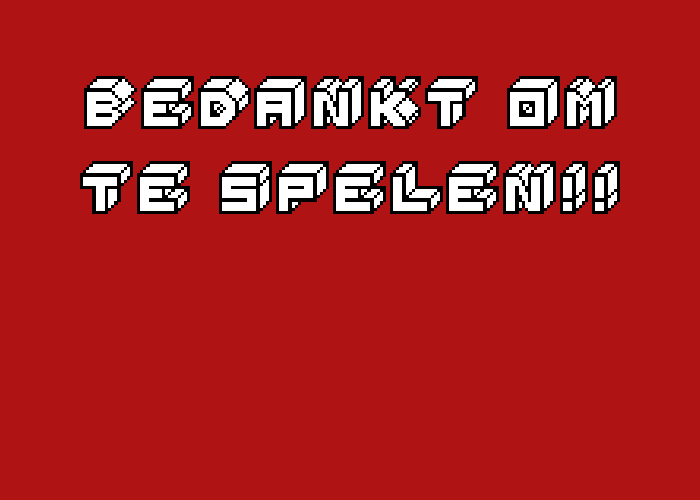
<style>
.page{position:relative;width:700px;height:500px;background:#b01313}
.page>*{position:absolute;margin:0}
.t1{font:100px/85px "3D-Thirteen-Pixel-Fonts";color:#000000}
</style>
<div class="page">
<p class="t1" style="left:80px;top:76px;width:540px;height:138px;text-align:center">BEDANKT OM<br>TE SPELEN!!</p>
</div>
